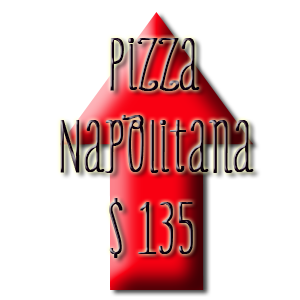
<style>
.page{position:relative;width:300px;height:300px;background:#ffffff}
.page>*{position:absolute;margin:0}
.t1{font:68px "OnlyYouProLight";font-weight:bold}
</style>
<div class="page">
<p class="t1" style="left:60px;top:38px;width:194px;height:220px">Pizza            Napolitana<br>    $ 135</p>
</div>
